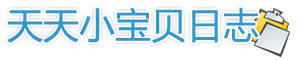
<style>
.page{position:relative;width:300px;height:60px;background:#ffffff}
.page>*{position:absolute;margin:0}
.t1{font:36px "MicrosoftYaHei";color:#3399cc}
</style>
<div class="page">
<p class="t1" style="left:7px;top:7px;width:252px;height:36px">天天小宝贝日志</p>
</div>
